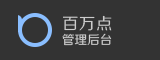
<style>
.page{position:relative;width:160px;height:60px;background:#333333}
.page>*{position:absolute;margin:0}
.t1{font:12.6px/18px "FZZHJW--GB1-0";color:#cccccc}
.t2{font:16.2px/18px "FZZHJW--GB1-0";letter-spacing:0.05em;color:#cccccc}
</style>
<div class="page">
<p class="t1" style="left:62px;top:15px;width:50px;height:31px"><span class="t2">百万点<br></span>管理后台</p>
</div>
